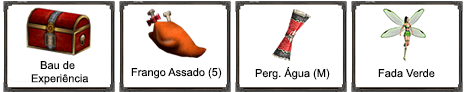
<style>
.page{position:relative;width:466px;height:92px;background:#ffffff}
.page>*{position:absolute;margin:0}
.t1{font:11px "ArialMT";color:#000000}
</style>
<div class="page">
<p class="t1" style="left:31px;top:61px;width:58px;height:24px">Bau de<br>Experiência</p>
<p class="t1" style="left:131px;top:67px;width:91px;height:12px">Frango Assado (5)</p>
<p class="t1" style="left:255px;top:67px;width:75px;height:13px">Perg. Água (M)</p>
<p class="t1" style="left:378px;top:69px;width:57px;height:9px">Fada Verde</p>
</div>
